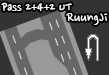
<style>
.page{position:relative;width:109px;height:75px;background:#333333}
.page>*{position:absolute;margin:0}
.t1{font:14px "NanumPen";color:#ffffff}
.t2{font:16px "NanumPen";color:#ffffff}
</style>
<div class="page">
<p class="t1" style="left:1px;top:2px;width:71px;height:10px">Pass 2+4+2 UT</p>
<p class="t2" style="left:66px;top:13px;width:42px;height:12px">RuungJi</p>
</div>
